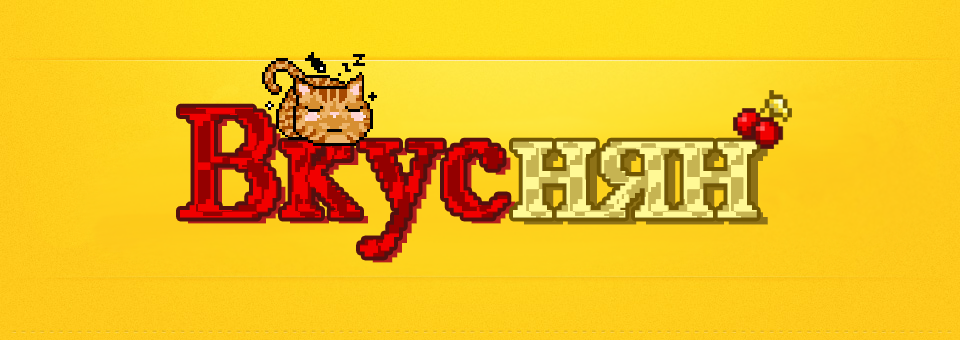
<style>
.page{position:relative;width:960px;height:340px}
.page>*{position:absolute;margin:0}
.t1{font:156px "MS Serif";font-weight:bold}
</style>
<div class="page">
<p class="t1" style="left:180px;top:107px;width:328px;height:150px">Вкус</p>
<p class="t1" style="left:188px;top:113px;width:328px;height:150px">Вкус</p>
<p class="t1" style="left:513px;top:141px;width:244px;height:77px">нян</p>
</div>
